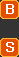
<style>
.page{position:relative;width:19px;height:57px;background:#e14f04}
.page>*{position:absolute;margin:0}
.t1{font:14px "ArialMT";color:#ffffff;font-weight:bold}
</style>
<div class="page">
<p class="t1" style="left:6px;top:4px;width:8px;height:10px">B</p>
<p class="t1" style="left:6px;top:42px;width:8px;height:10px">S</p>
</div>
